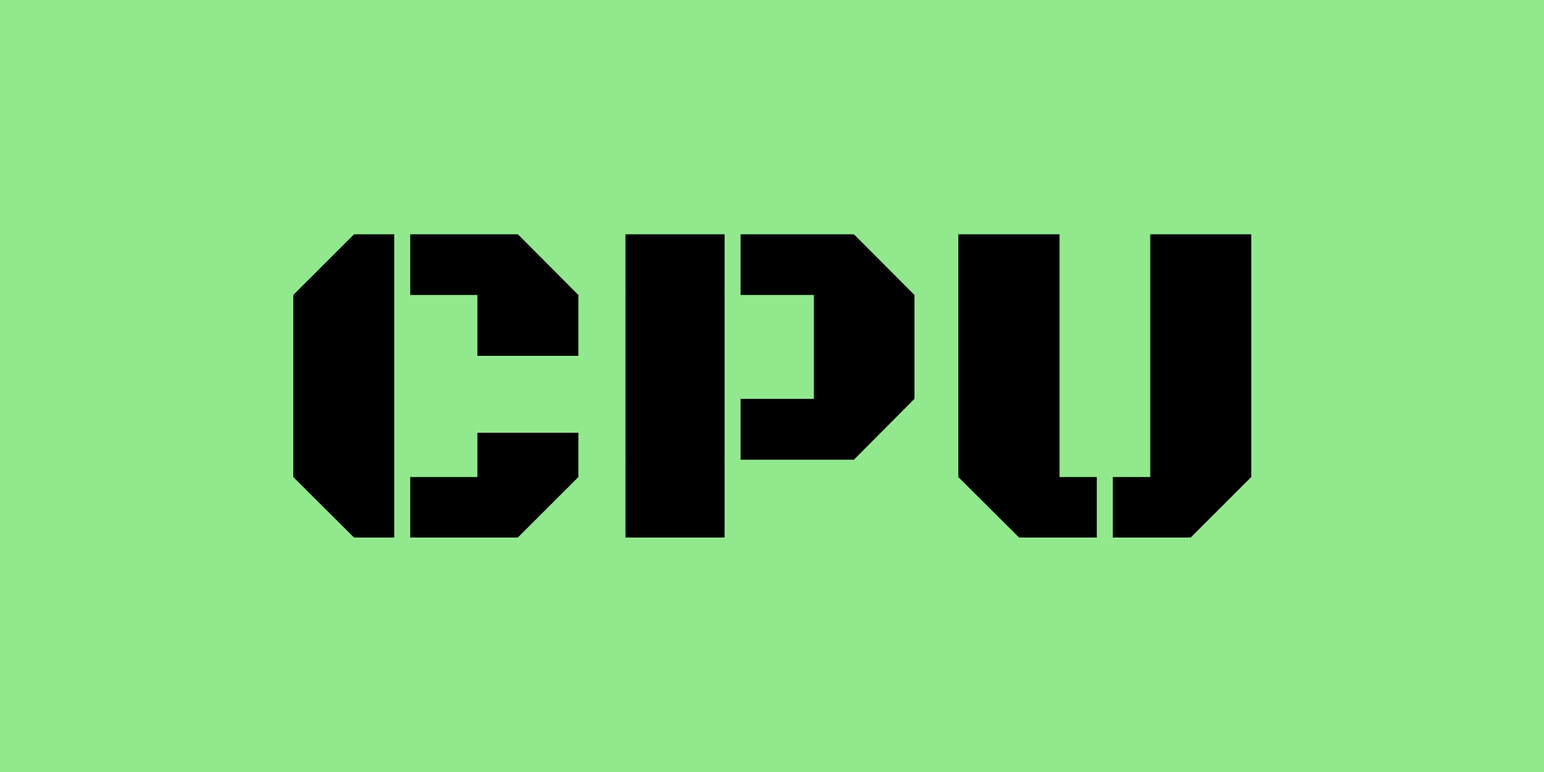
<style>
.page{position:relative;width:1544px;height:772px;background:#92e98d}
.page>*{position:absolute;margin:0}
.t1{font:468px "BlackOpsOne-Regular";color:#000000}
</style>
<div class="page">
<p class="t1" style="left:293px;top:234px;width:959px;height:304px">CPU</p>
</div>
